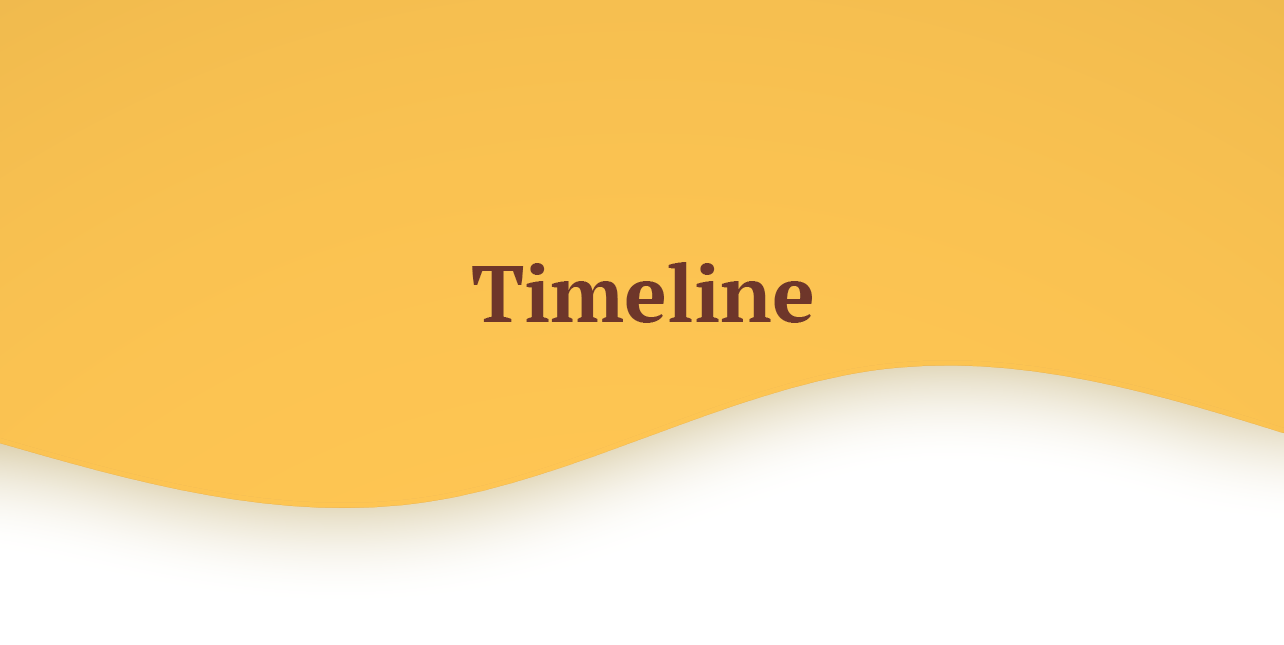
<style>
.page{position:relative;width:1284px;height:645px}
.page>*{position:absolute;margin:0}
.t1{font:80px "PTSerif-Bold";color:#6e362a}
</style>
<div class="page">
<p class="t1" style="left:472px;top:262px;width:340px;height:61px">Timeline</p>
</div>
